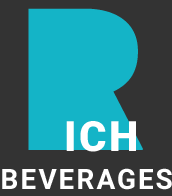
<style>
.page{position:relative;width:172px;height:196px;background:#333333}
.page>*{position:absolute;margin:0}
.t1{font:28.1px "Roboto-Bold";letter-spacing:0.07em;color:#ffffff}
</style>
<div class="page">
<p class="t1" style="left:2px;top:168px;width:170px;height:22px">BEVERAGES</p>
</div>
